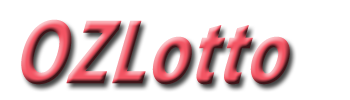
<style>
.page{position:relative;width:350px;height:100px;background:#ffffff}
.page>*{position:absolute;margin:0}
.t1{font:92px "MyriadPro-BoldIt";font-weight:bold;font-style:italic;scale:0.79 1}
</style>
<div class="page">
<p class="t1" style="left:21px;top:19px;width:269px;height:66px">OZLotto</p>
</div>
